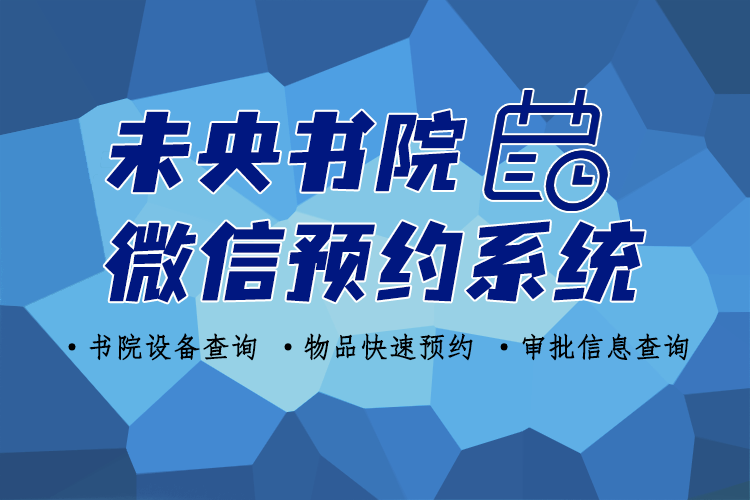
<style>
.page{position:relative;width:750px;height:500px}
.page>*{position:absolute;margin:0}
.t1{font:90px/110px "YS-HelloFont-BangBangTi";color:#001780;font-style:italic}
.t2{font:28px "FangSong";color:#000000;font-weight:bold}
</style>
<div class="page">
<p class="t1" style="left:104px;top:110px;width:541px;height:193px">未央书院<br>微信预约系统</p>
<p class="t2" style="left:68px;top:333px;width:621px;height:28px">·书院设备查询 ·物品快速预约 ·审批信息查询</p>
</div>
